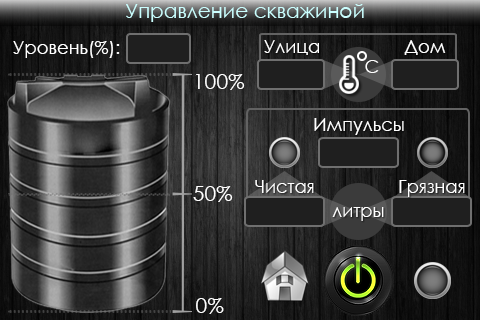
<style>
.page{position:relative;width:480px;height:320px}
.page>*{position:absolute;margin:0}
.t1{font:20px "KZCenturyGothic";color:#cbffff}
.t2{font:18px "KZCenturyGothic";color:#ffffff}
.t3{font:21.3px "KZCenturyGothic";color:#ffffff}
</style>
<div class="page">
<p class="t1" style="left:126px;top:4px;width:238px;height:18px">Управление скважиной</p>
<p class="t2" style="left:13px;top:41px;width:107px;height:17px">Уровень(%):</p>
<p class="t2" style="left:264px;top:40px;width:55px;height:15px">Улица</p>
<p class="t2" style="left:404px;top:40px;width:42px;height:15px">Дом</p>
<p class="t3" style="left:195px;top:74px;width:50px;height:16px">100%</p>
<p class="t2" style="left:314px;top:118px;width:90px;height:17px">Импульсы</p>
<p class="t2" style="left:255px;top:180px;width:59px;height:13px">Чистая</p>
<p class="t2" style="left:399px;top:180px;width:66px;height:17px">Грязная</p>
<p class="t3" style="left:193px;top:186px;width:40px;height:16px">50%</p>
<p class="t2" style="left:332px;top:207px;width:52px;height:14px">литры</p>
<p class="t3" style="left:196px;top:298px;width:28px;height:16px">0%</p>
</div>
